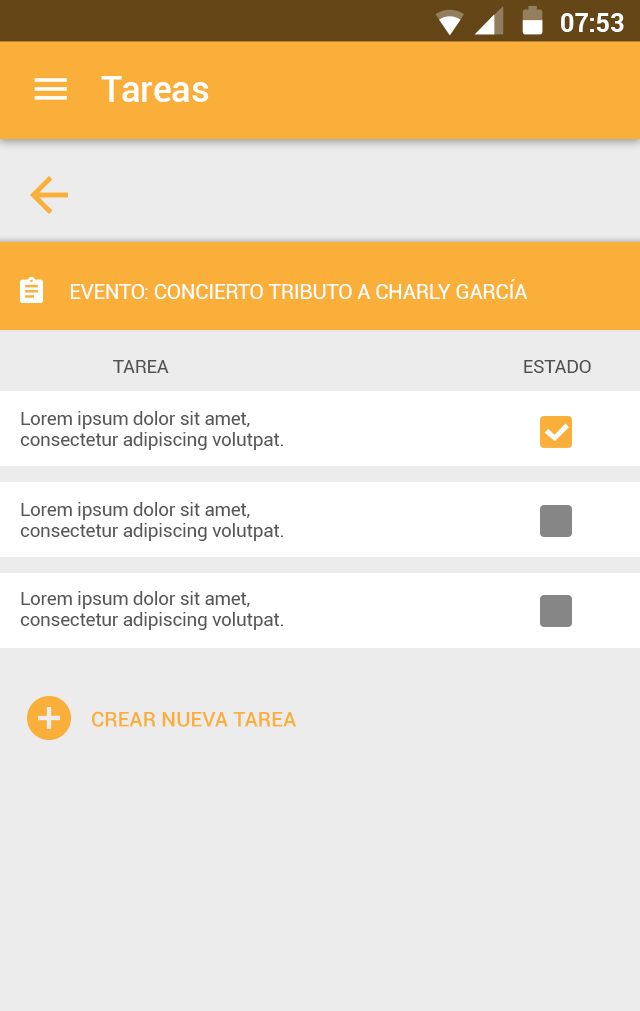
<style>
.page{position:relative;width:640px;height:1011px;background:#ececec}
.page>*{position:absolute;margin:0}
.t1{font:24.9px "Roboto-Bold";color:#ffffff}
.t2{font:35.8px "Roboto-Medium";letter-spacing:0.005em;color:#ffffff}
.t3{font:20.8px "Roboto-Regular";letter-spacing:-0.01em;color:#ffffff}
.t4{font:18.7px "Roboto-Regular";letter-spacing:-0.01em;color:#515151}
.t5{font:18.8px/20.8px "Roboto-Regular";letter-spacing:-0.01em;color:#585858}
.t6{font:20.8px "Roboto-Medium";color:#faaf3a}
</style>
<div class="page">
<p class="t1" style="left:561px;top:13px;width:63px;height:19px">07:53</p>
<p class="t2" style="left:101px;top:76px;width:108px;height:26px">Tareas</p>
<p class="t3" style="left:70px;top:279px;width:457px;height:20px">EVENTO: CONCIERTO TRIBUTO A CHARLY GARCÍA</p>
<p class="t4" style="left:113px;top:360px;width:56px;height:13px">TAREA</p>
<p class="t4" style="left:524px;top:360px;width:67px;height:13px">ESTADO</p>
<p class="t5" style="left:20px;top:411px;width:263px;height:39px">Lorem ipsum dolor sit amet, consectetur adipiscing volutpat.</p>
<p class="t5" style="left:20px;top:502px;width:263px;height:39px">Lorem ipsum dolor sit amet, consectetur adipiscing volutpat.</p>
<p class="t5" style="left:20px;top:591px;width:263px;height:39px">Lorem ipsum dolor sit amet, consectetur adipiscing volutpat.</p>
<p class="t6" style="left:92px;top:711px;width:204px;height:16px">CREAR NUEVA TAREA</p>
</div>
